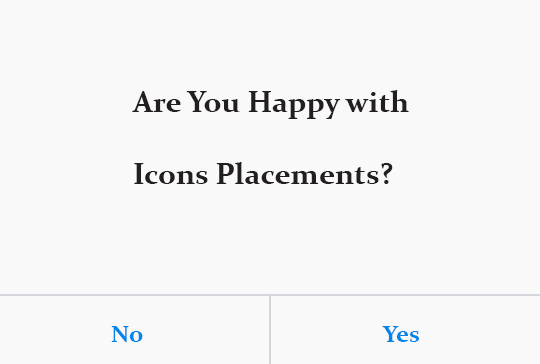
<style>
.page{position:relative;width:540px;height:364px;background:#f9f9f9}
.page>*{position:absolute;margin:0}
.t1{font:30px "Constantia-Bold";color:#231f20}
.t2{font:24px "Constantia-Bold";color:#0385ea}
</style>
<div class="page">
<p class="t1" style="left:132px;top:90px;width:277px;height:94px">Are You Happy with<br><br>Icons Placements?</p>
<p class="t2" style="left:111px;top:326px;width:32px;height:16px">No</p>
<p class="t2" style="left:382px;top:326px;width:37px;height:16px">Yes</p>
</div>
